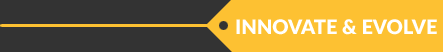
<style>
.page{position:relative;width:443px;height:52px;background:#333333}
.page>*{position:absolute;margin:0}
.t1{font:20px "Lato-Black";color:#ffffff}
</style>
<div class="page">
<p class="t1" style="left:236px;top:19px;width:201px;height:16px">INNOVATE &amp; EVOLVE</p>
</div>
